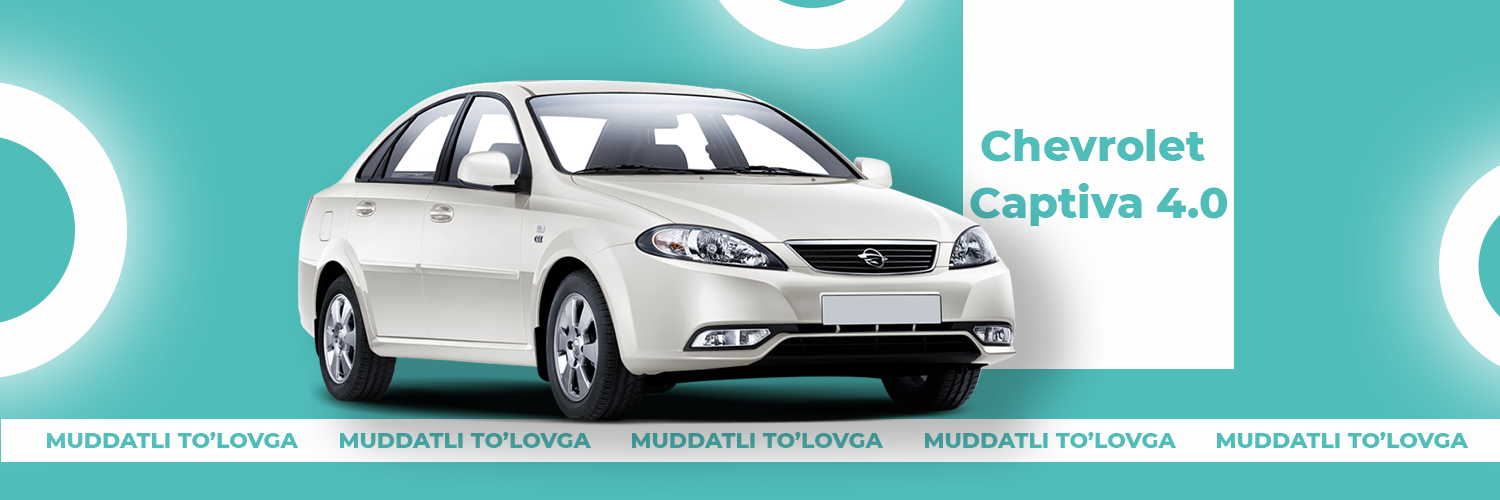
<style>
.page{position:relative;width:1500px;height:500px;background:#4fbdba}
.page>*{position:absolute;margin:0}
.t1{font:43.2px/57.4px "Montserrat-ExtraBold";color:#4fbdba}
.t2{font:22px "Montserrat-ExtraBold";color:#4fbdba}
.t3{font:22px "Montserrat-ExtraBold";color:#419d9b}
.t4{font:22px "Montserrat-ExtraBold";color:#3f9694}
</style>
<div class="page">
<p class="t1" style="left:970px;top:129px;width:258px;height:97px;text-align:center">Chevrolet <br>Captiva 4.0</p>
<p class="t2" style="left:47px;top:432px;width:252px;height:16px">MUDDATLI TO’LOVGA</p>
<p class="t3" style="left:340px;top:432px;width:252px;height:16px">MUDDATLI TO’LOVGA</p>
<p class="t4" style="left:632px;top:432px;width:252px;height:16px">MUDDATLI TO’LOVGA</p>
<p class="t2" style="left:925px;top:432px;width:252px;height:16px">MUDDATLI TO’LOVGA</p>
<p class="t2" style="left:1217px;top:432px;width:252px;height:16px">MUDDATLI TO’LOVGA</p>
</div>
